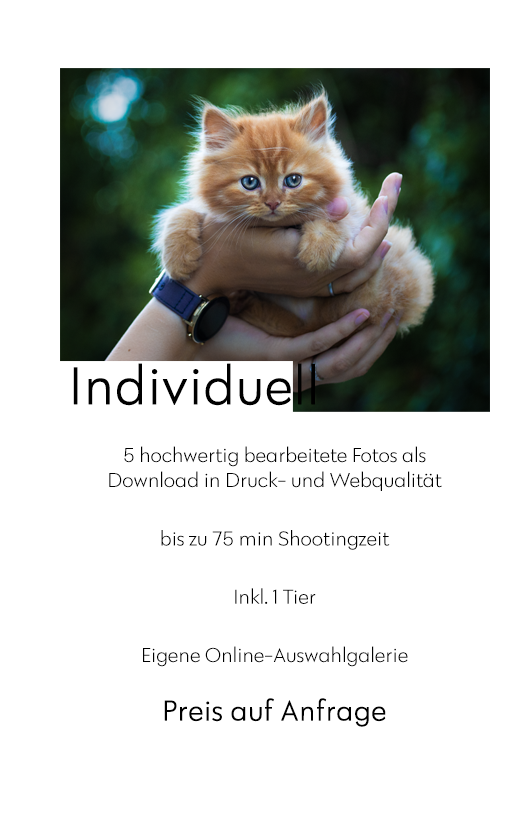
<style>
.page{position:relative;width:532px;height:825px;background:#ffffff}
.page>*{position:absolute;margin:0}
.t1{font:54.4px "Klik-Light";color:#000000;font-weight:bold}
.t2{font:20.8px/58.3px "Klik-Light";color:#000000}
.t3{font:20.8px/54.2px "Klik-Light";color:#000000}
.t4{font:20.8px "Klik-Light";color:#000000}
.t5{font:29.2px/58.3px "Klik-Light";color:#000000;font-weight:bold}
</style>
<div class="page">
<p class="t1" style="left:73px;top:363px;width:242px;height:43px">Individuell</p>
<p class="t2" style="left:109px;top:446px;width:333px;height:281px;text-align:center"><span class="t3">5 hochwertig bearbeitete Fotos als<br></span><span class="t4">Download in Druck- und Webqualität<br></span>bis zu 75 min Shootingzeit<br>Inkl. 1 Tier<br>Eigene Online-Auswahlgalerie<br><span class="t5">Preis auf Anfrage</span></p>
</div>
